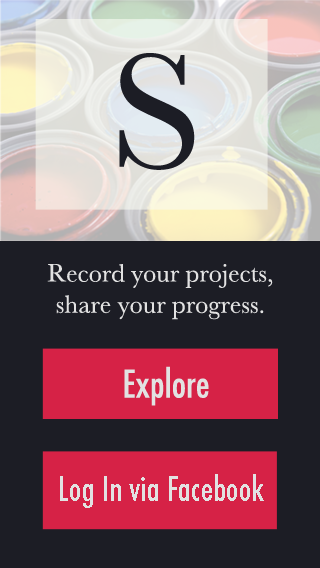
<style>
.page{position:relative;width:320px;height:568px;background:#1c1d25}
.page>*{position:absolute;margin:0}
.t1{font:170px "Baskerville";color:#1c1d25}
.t2{font:26px "Baskerville";color:#e2e2e2}
.t3{font:37px "Futura-CondensedMedium";color:#e2e2e2}
.t4{font:33px "Futura-CondensedMedium";color:#e2e2e2}
</style>
<div class="page">
<p class="t1" style="left:119px;top:53px;width:76px;height:117px">S</p>
<p class="t2" style="left:47px;top:264px;width:226px;height:56px;text-align:center">Record your projects, share your progress.</p>
<p class="t3" style="left:124px;top:366px;width:85px;height:40px">Explore</p>
<p class="t4" style="left:60px;top:474px;width:204px;height:34px">Log In via Facebook</p>
</div>
